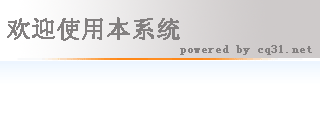
<style>
.page{position:relative;width:320px;height:120px;background:#ffffff}
.page>*{position:absolute;margin:0}
.t1{font:24px "NSimSun";color:#838080;font-weight:bold}
.t2{font:12px "NSimSun";color:#838080;font-weight:bold}
</style>
<div class="page">
<p class="t1" style="left:7px;top:17px;width:173px;height:24px">欢迎使用本系统</p>
<p class="t2" style="left:180px;top:45px;width:132px;height:10px">powered by cq31.net</p>
</div>
